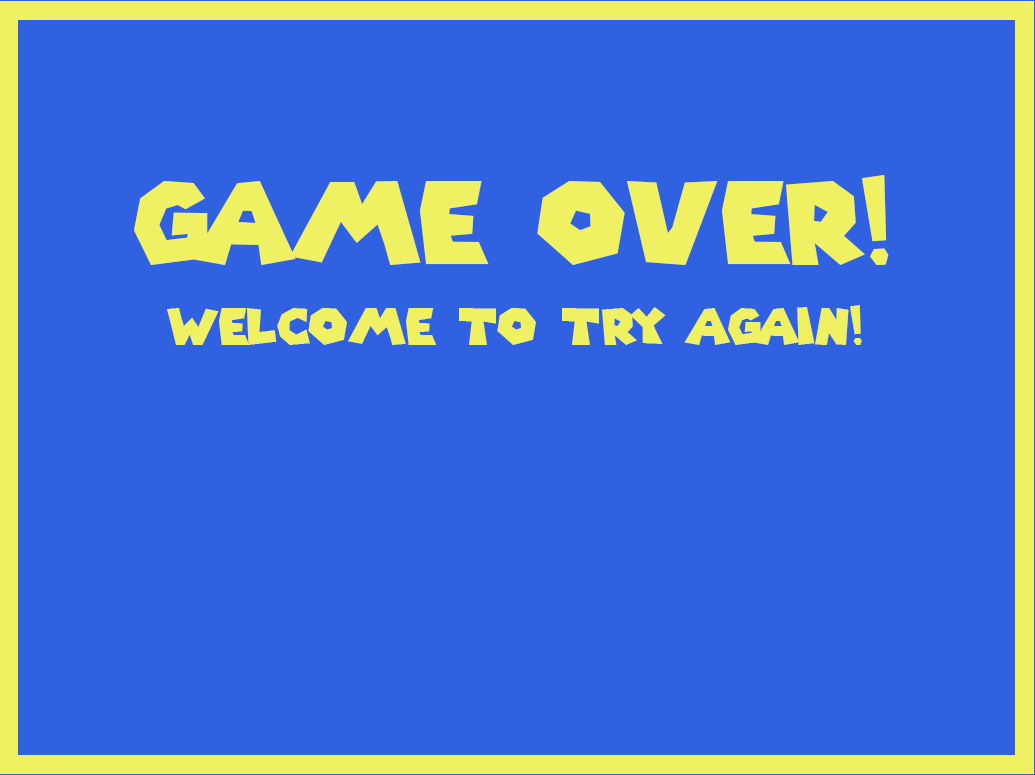
<style>
.page{position:relative;width:1035px;height:775px;background:#2f61e1}
.page>*{position:absolute;margin:0}
.t1{font:50px/79.3px "SuperMarioGalaxy";color:#eff163}
.t2{font:112.5px/79.3px "SuperMarioGalaxy";color:#eff163}
</style>
<div class="page">
<p class="t1" style="left:134px;top:175px;width:755px;height:170px;text-align:center"><span class="t2">Game over!<br></span>welcome to try again!</p>
</div>
